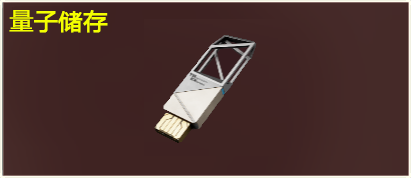
<style>
.page{position:relative;width:411px;height:178px}
.page>*{position:absolute;margin:0}
.t1{font:24px "MicrosoftYaHeiUI";color:#f4ff00;font-weight:bold}
</style>
<div class="page">
<p class="t1" style="left:9px;top:10px;width:99px;height:23px">量子储存</p>
</div>
